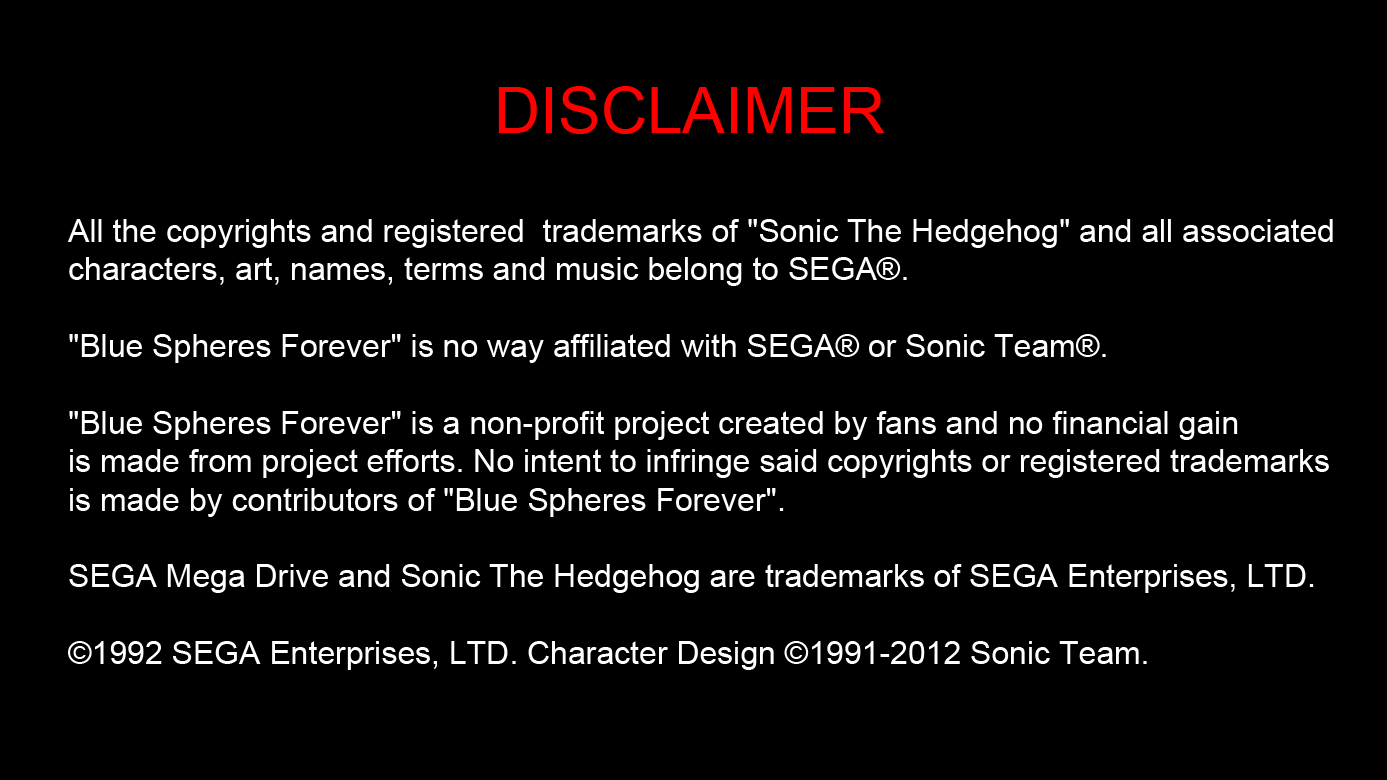
<style>
.page{position:relative;width:1387px;height:780px;background:#000000}
.page>*{position:absolute;margin:0}
.t1{font:64px "ArialMT";color:#ff0000}
.t2{font:32px "ArialMT";color:#ffffff}
</style>
<div class="page">
<p class="t1" style="left:498px;top:86px;width:387px;height:48px">DISCLAIMER</p>
<p class="t2" style="left:67px;top:219px;width:1266px;height:451px">All the copyrights and registered  trademarks of "Sonic The Hedgehog" and all associated <br>characters, art, names, terms and music belong to SEGA®. <br><br>"Blue Spheres Forever" is no way affiliated with SEGA® or Sonic Team®.<br><br>"Blue Spheres Forever" is a non-profit project created by fans and no financial gain <br>is made from project efforts. No intent to infringe said copyrights or registered trademarks<br>is made by contributors of "Blue Spheres Forever".<br><br>SEGA Mega Drive and Sonic The Hedgehog are trademarks of SEGA Enterprises, LTD.<br><br>©1992 SEGA Enterprises, LTD. Character Design ©1991-2012 Sonic Team.</p>
</div>
